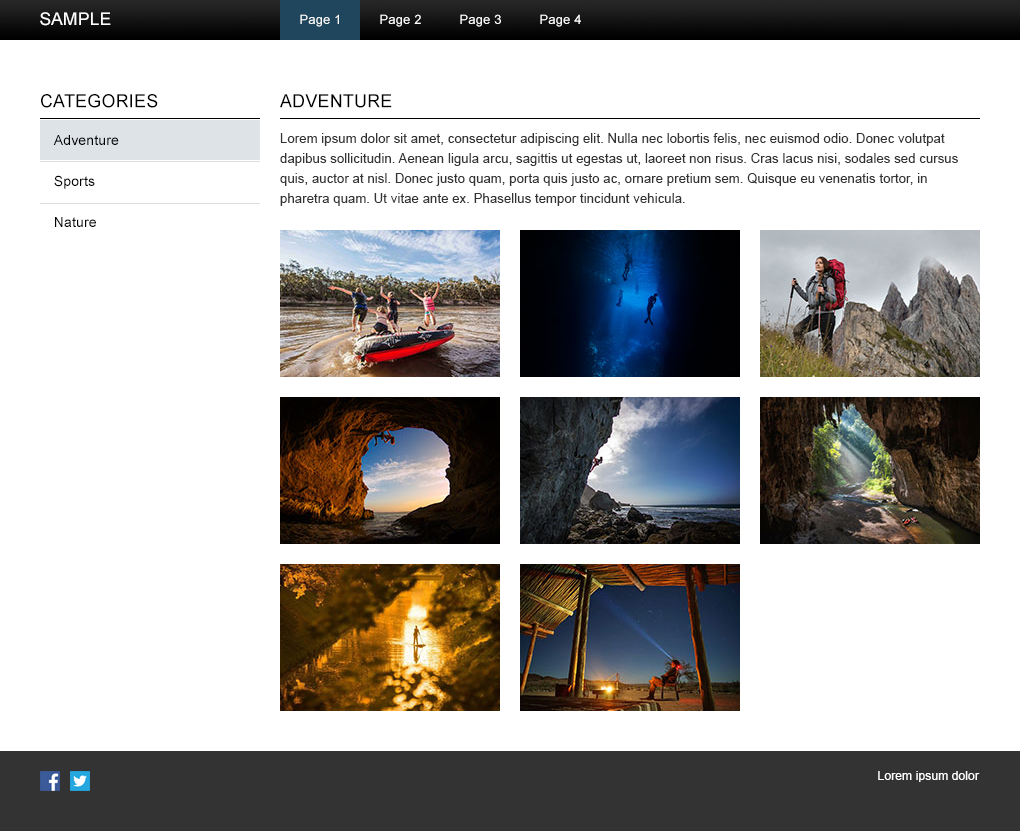
<style>
.page{position:relative;width:1020px;height:831px;background:#ffffff}
.page>*{position:absolute;margin:0}
.t1{font:17.4px "ArialMT";letter-spacing:0.01em;color:#ffffff;text-transform:uppercase}
.t2{font:13px "ArialMT";letter-spacing:0.01em;color:#ffffff}
.t3{font:18px "ArialMT";letter-spacing:0.01em;color:#000000;text-transform:uppercase}
.t4{font:14px "ArialMT";letter-spacing:0.01em;color:#000000}
.t5{font:13px/20px "ArialMT";letter-spacing:0.01em;color:#333333}
.t6{font:14px "ArialMT";letter-spacing:0.01em;color:#000000;text-transform:uppercase}
.t7{font:12px "ArialMT";letter-spacing:0.01em;color:#ffffff}
</style>
<div class="page">
<p class="t1" style="left:40px;top:12px;width:71px;height:14px">Sample</p>
<p class="t2" style="left:300px;top:14px;width:39px;height:13px">Page 1</p>
<p class="t2" style="left:380px;top:14px;width:41px;height:13px">Page 2</p>
<p class="t2" style="left:460px;top:14px;width:41px;height:13px">Page 3</p>
<p class="t2" style="left:540px;top:14px;width:41px;height:13px">Page 4</p>
<p class="t3" style="left:41px;top:94px;width:117px;height:14px">categories</p>
<p class="t3" style="left:280px;top:94px;width:112px;height:14px">adventure</p>
<p class="t4" style="left:53px;top:135px;width:66px;height:10px">Adventure</p>
<p class="t5" style="left:280px;top:133px;width:678px;height:73px">Lorem ipsum dolor sit amet, consectetur adipiscing elit. Nulla nec lobortis felis, nec euismod odio. Donec volutpat dapibus sollicitudin. Aenean ligula arcu, sagittis ut egestas ut, laoreet non risus. Cras lacus nisi, sodales sed cursus quis, auctor at nisl. Donec justo quam, porta quis justo ac, ornare pretium sem. Quisque eu venenatis tortor, in pharetra quam. Ut vitae ante ex. Phasellus tempor tincidunt vehicula.</p>
<p class="t4" style="left:54px;top:175px;width:41px;height:14px"><span class="t6">S</span>ports</p>
<p class="t4" style="left:55px;top:217px;width:41px;height:10px">Nature</p>
<p class="t7" style="left:878px;top:771px;width:102px;height:11px">Lorem ipsum dolor</p>
</div>
